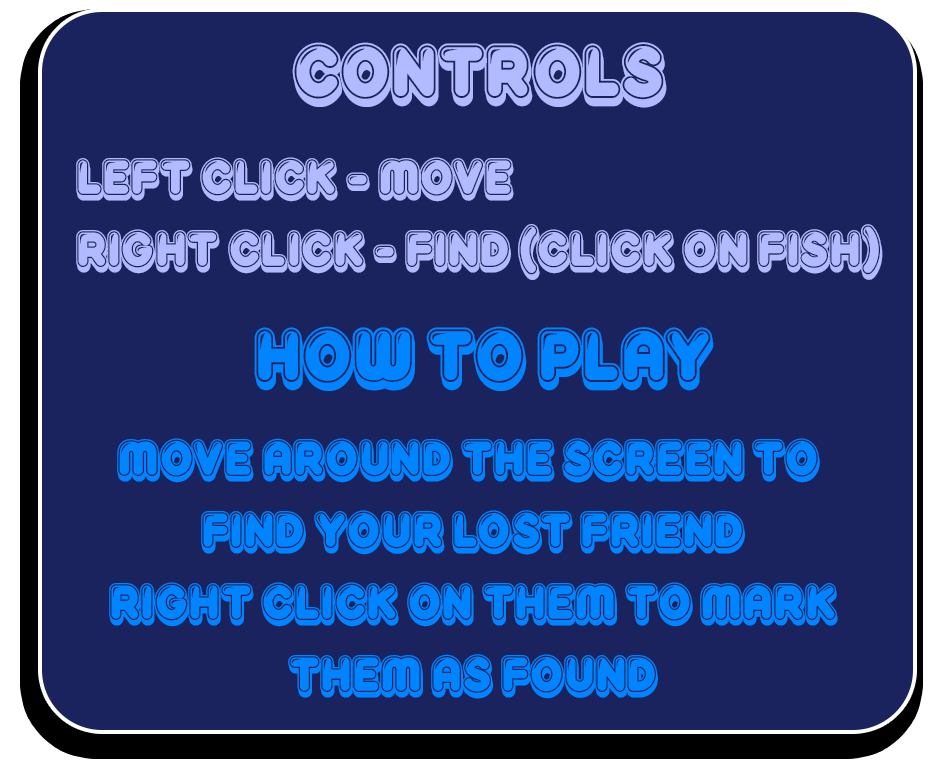
<style>
.page{position:relative;width:943px;height:764px;background:#1b235f}
.page>*{position:absolute;margin:0}
.t1{font:88.5px "Reglisse";color:#b2bbff}
.t2{font:60px "Reglisse";color:#b2bbff}
.t3{font:88.5px "Reglisse";color:#0084ff}
.t4{font:60px "Reglisse";color:#0084ff}
</style>
<div class="page">
<p class="t1" style="left:292px;top:42px;width:375px;height:66px">Controls</p>
<p class="t2" style="left:76px;top:157px;width:807px;height:123px">Left Click - Move<br>Right Click - Find (click on fish)</p>
<p class="t3" style="left:254px;top:326px;width:460px;height:65px">How To Play</p>
<p class="t4" style="left:109px;top:438px;width:729px;height:261px;text-align:center">Move around the screen to <br>find your lost friend<br>Right click on them to mark<br>them as found</p>
</div>
